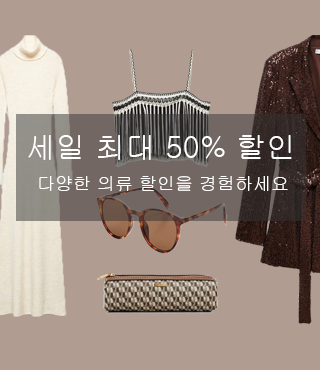
<style>
.page{position:relative;width:320px;height:370px;background:#b19c91}
.page>*{position:absolute;margin:0}
.t1{font:30px "Gulim";color:#ffffff}
.t2{font:18px "Gulim";color:#ffffff}
</style>
<div class="page">
<p class="t1" style="left:28px;top:135px;width:264px;height:25px">세일 최대 50% 할인</p>
<p class="t2" style="left:39px;top:176px;width:249px;height:15px">다양한 의류 할인을 경험하세요</p>
</div>
